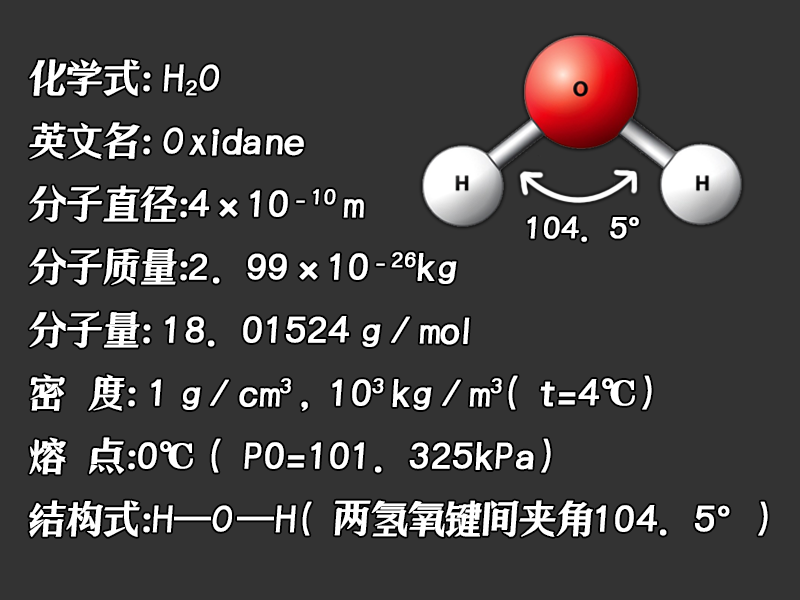
<style>
.page{position:relative;width:800px;height:600px;background:#333333}
.page>*{position:absolute;margin:0}
.t1{font:36px "ZoomlaShuaisongA028";color:#ffffff;font-weight:bold}
.t2{font:30px "ZoomlaShuaisongA028";color:#ffffff;font-weight:bold}
</style>
<div class="page">
<p class="t1" style="left:29px;top:59px;width:739px;height:478px">化学式： H2O<br>英文名： Oxidane<br>分子直径：4×10-10 m<br>分子质量：2.99×10-26kg<br>分子量： 18.01524 g/mol<br>密  度： 1 g/cm3,103 kg/m3（t=4℃）<br>熔  点：0℃ (P0=101.325kPa)<br>结构式：H—O—H（两氢氧键间夹角104.5°）</p>
<p class="t2" style="left:527px;top:216px;width:112px;height:26px">104.5°</p>
</div>
